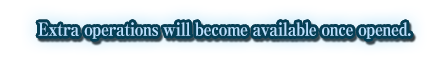
<style>
.page{position:relative;width:447px;height:59px;background:#ffffff}
.page>*{position:absolute;margin:0}
.t1{font:18px "RyuminPro-ExBold";letter-spacing:-0.04em;color:#b9e0ff;scale:0.9 1}
</style>
<div class="page">
<p class="t1" style="left:38px;top:22px;width:373px;height:17px">Extra operations will become available once opened.</p>
</div>
